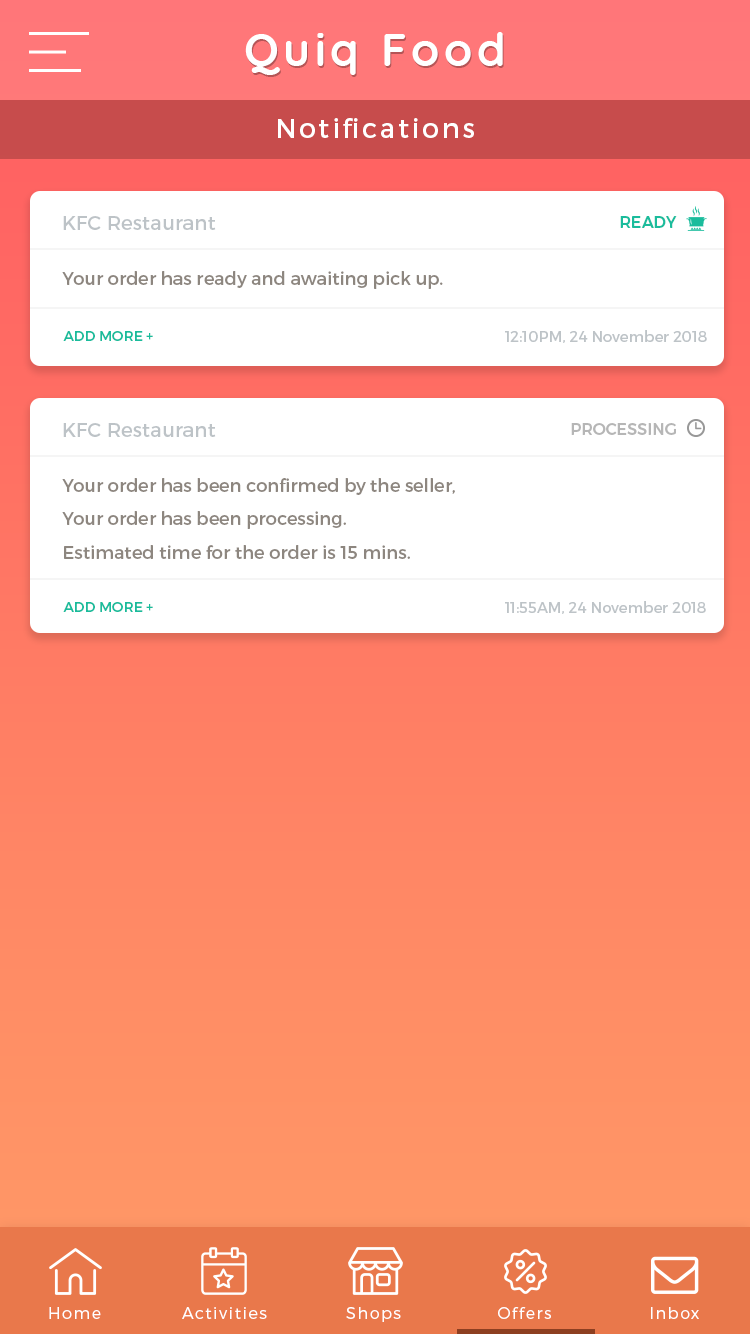
<style>
.page{position:relative;width:750px;height:1334px;background:#ffffff}
.page>*{position:absolute;margin:0}
.t1{font:46px "Quicksand-Bold";letter-spacing:0.1em;color:#ffffff}
.t2{font:27px "Montserrat-Regular";letter-spacing:0.1em;color:#ffffff}
.t3{font:20px "Montserrat-Regular";color:#bdc3c7}
.t4{font:20px "Montserrat-Regular";color:#bdc3c7;text-transform:uppercase}
.t5{font:16px "Montserrat-Medium";color:#1abc9c;text-transform:uppercase}
.t6{font:18px "Montserrat-Regular";color:#8d867f}
.t7{font:14px "Montserrat-Regular";color:#1abc9c;text-transform:uppercase}
.t8{font:15px "Montserrat-Regular";color:#bdc3c7}
.t9{font:16px "Montserrat-Medium";color:#b6b6b6;text-transform:uppercase}
.t10{font:18px/33.4px "Montserrat-Regular";color:#8d867f}
.t11{font:16px "Montserrat-Light";letter-spacing:0.1em;color:#ffffff}
</style>
<div class="page">
<p class="t1" style="left:245px;top:32px;width:258px;height:43px">Quiq Food</p>
<p class="t2" style="left:278px;top:118px;width:196px;height:20px">Notifications</p>
<p class="t3" style="left:63px;top:216px;width:153px;height:14px"><span class="t4">KFC </span>Restaurant</p>
<p class="t5" style="left:620px;top:216px;width:57px;height:12px">Ready</p>
<p class="t6" style="left:62px;top:271px;width:381px;height:18px">Your order has ready and awaiting pick up.</p>
<p class="t7" style="left:63px;top:331px;width:90px;height:10px">Add more +</p>
<p class="t8" style="left:505px;top:330px;width:202px;height:13px">12:10PM, 24 November 2018</p>
<p class="t3" style="left:63px;top:423px;width:153px;height:14px"><span class="t4">KFC </span>Restaurant</p>
<p class="t9" style="left:571px;top:423px;width:105px;height:12px">ProcessinG</p>
<p class="t10" style="left:62px;top:478px;width:393px;height:81px">Your order has been confirmed by the seller,<br>Your order has been processing.<br>Estimated time for the order is 15 mins.</p>
<p class="t7" style="left:63px;top:602px;width:90px;height:10px">Add more +</p>
<p class="t8" style="left:505px;top:601px;width:201px;height:13px">11:55AM, 24 November 2018</p>
<p class="t11" style="left:49px;top:1307px;width:52px;height:12px">Home</p>
<p class="t11" style="left:182px;top:1307px;width:85px;height:12px">Activities</p>
<p class="t11" style="left:346px;top:1307px;width:55px;height:15px">Shops</p>
<p class="t11" style="left:498px;top:1307px;width:53px;height:12px">Offers</p>
<p class="t11" style="left:651px;top:1307px;width:48px;height:12px">Inbox</p>
</div>
